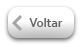
<style>
.page{position:relative;width:83px;height:47px;background:#ffffff}
.page>*{position:absolute;margin:0}
.t1{font:12.5px "Corbel-Bold";color:#646262}
</style>
<div class="page">
<p class="t1" style="left:29px;top:18px;width:34px;height:9px">Voltar</p>
</div>
